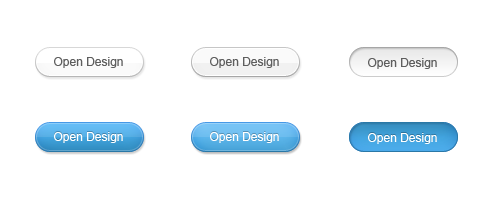
<style>
.page{position:relative;width:500px;height:204px;background:#ffffff}
.page>*{position:absolute;margin:0}
.t1{font:12px "ArialMT";color:#5e5e5e}
.t2{font:12px "ArialMT";color:#ffffff}
</style>
<div class="page">
<p class="t1" style="left:54px;top:57px;width:69px;height:11px">Open Design</p>
<p class="t1" style="left:210px;top:57px;width:69px;height:11px">Open Design</p>
<p class="t1" style="left:368px;top:58px;width:69px;height:11px">Open Design</p>
<p class="t2" style="left:54px;top:132px;width:69px;height:11px">Open Design</p>
<p class="t2" style="left:210px;top:132px;width:69px;height:11px">Open Design</p>
<p class="t2" style="left:368px;top:133px;width:69px;height:11px">Open Design</p>
</div>
